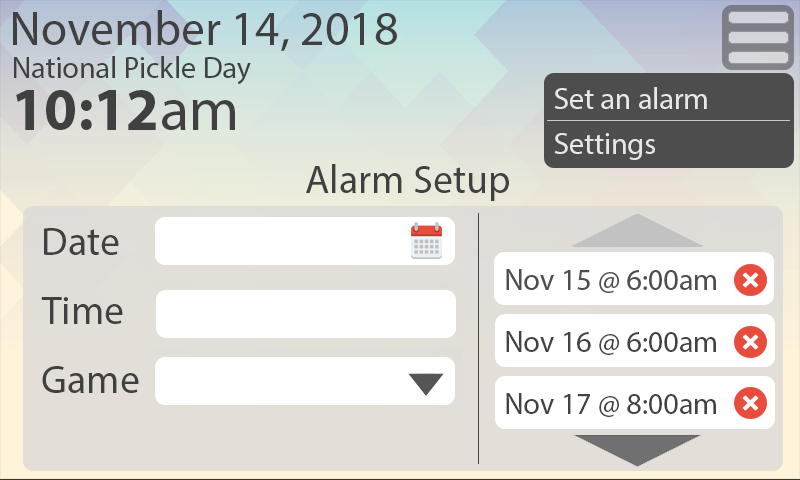
<style>
.page{position:relative;width:800px;height:480px}
.page>*{position:absolute;margin:0}
.t1{font:48px "MyriadPro-Regular";color:#404040}
.t2{font:30px "MyriadPro-Regular";color:#404040}
.t3{font:30px "MyriadPro-Regular";color:#e8e8e8}
.t4{font:60px "MyriadPro-Bold";color:#404040}
.t5{font:60px "MyriadPro-Regular";color:#404040}
.t6{font:40px "MyriadPro-Regular";color:#404040}
.t7{font:30px "MyriadPro-Regular";color:#424242}
</style>
<div class="page">
<p class="t1" style="left:13px;top:10px;width:384px;height:41px">November 14, 2018</p>
<p class="t2" style="left:14px;top:56px;width:237px;height:29px">National Pickle Day</p>
<p class="t3" style="left:554px;top:87px;width:153px;height:22px">Set an alarm</p>
<p class="t4" style="left:16px;top:90px;width:219px;height:40px">10:12<span class="t5">am</span></p>
<p class="t3" style="left:554px;top:133px;width:101px;height:27px">Settings</p>
<p class="t6" style="left:306px;top:164px;width:203px;height:37px">Alarm Setup</p>
<p class="t6" style="left:44px;top:228px;width:75px;height:27px">Date</p>
<p class="t6" style="left:41px;top:297px;width:82px;height:27px">Time</p>
<p class="t7" style="left:506px;top:331px;width:210px;height:24px">Nov 16 @ 6:00am</p>
<p class="t6" style="left:42px;top:366px;width:97px;height:27px">Game</p>
<p class="t7" style="left:506px;top:393px;width:210px;height:24px">Nov 17 @ 8:00am</p>
</div>
